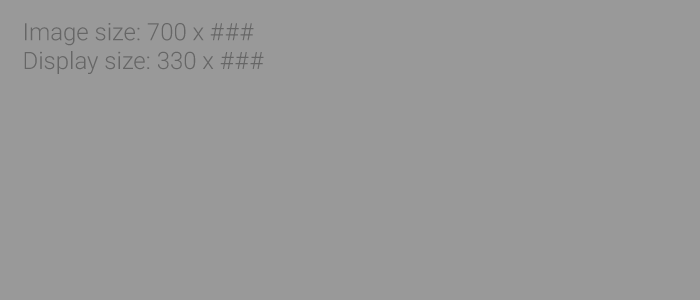
<style>
.page{position:relative;width:700px;height:300px;background:#999999}
.page>*{position:absolute;margin:0}
.t1{font:24px "Roboto-Light";color:#666666}
</style>
<div class="page">
<p class="t1" style="left:24px;top:23px;width:240px;height:51px">Image size: 700 x ###<br>Display size: 330 x ###</p>
</div>
